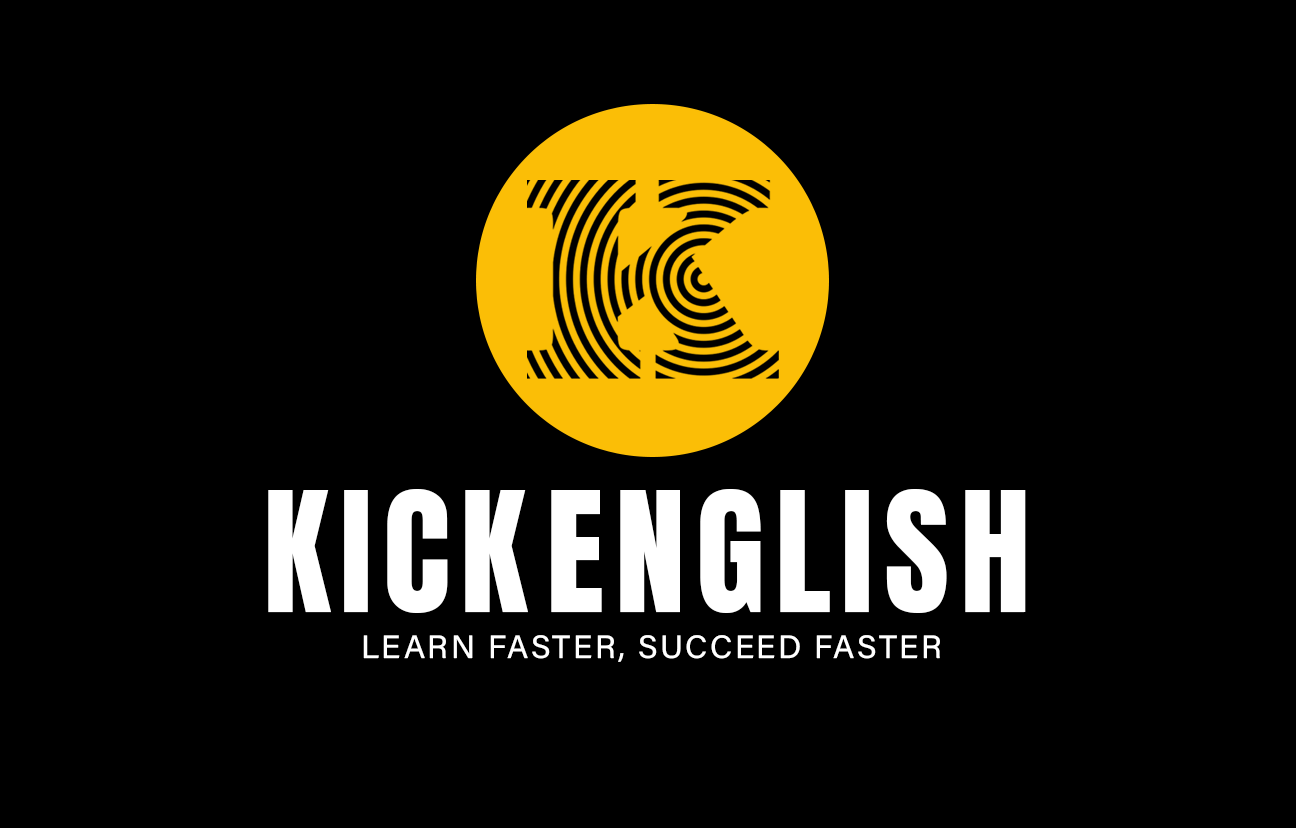
<style>
.page{position:relative;width:1296px;height:828px;background:#000000}
.page>*{position:absolute;margin:0}
.t1{font:141.3px "Anton-Regular";letter-spacing:0.075em;color:#ffffff}
.t2{font:32.3px "AcuminConcept-Regular";letter-spacing:0.075em;color:#ffffff;text-transform:uppercase}
</style>
<div class="page">
<p class="t1" style="left:268px;top:489px;width:260px;height:124px">KICK</p>
<p class="t1" style="left:551px;top:489px;width:475px;height:124px">ENGLISH</p>
<p class="t2" style="left:363px;top:635px;width:577px;height:27px">Learn faster, succeed faster</p>
</div>
